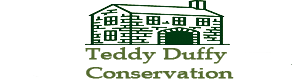
<style>
.page{position:relative;width:300px;height:80px;background:#ffffff}
.page>*{position:absolute;margin:0}
.t1{font:16px "BookAntiqua";color:#556b2f;font-weight:bold;scale:1.47 1}
</style>
<div class="page">
<p class="t1" style="left:85px;top:47px;width:149px;height:32px">Teddy Duffy <br>Conservation</p>
</div>
